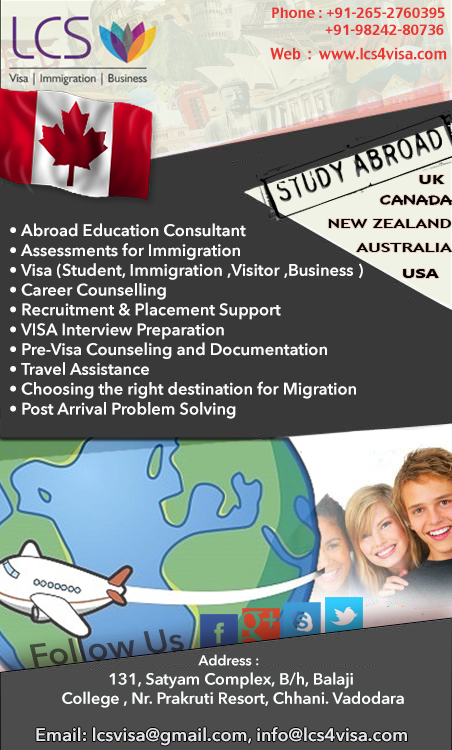
<style>
.page{position:relative;width:452px;height:750px;background:#393939}
.page>*{position:absolute;margin:0}
.t1{font:14px "CharcoalCY";color:#e93733}
.t2{font:15.4px "CharcoalCY";color:#e93733;scale:0.9 1}
.t3{font:13px "MicrosoftTaiLe-Bold";color:#000000;scale:1.42 1}
.t4{font:13px "Chalkboard-Bold";color:#030303;scale:1.42 1}
.t5{font:13px "TrebuchetMS-Bold";color:#000000;scale:1.42 1}
.t6{font:16.5px "AvenirNext-DemiBold";color:#fcfdfe}
.t7{font:13px "TrebuchetMS-Bold";color:#020202;scale:1.42 1}
.t8{font:32.6px "AvenirNext-DemiBold";color:#33383b;scale:1.06 1}
.t9{font:16px "AvenirNext-DemiBold";color:#fcffff}
.t10{font:14px "AvenirNext-DemiBold";color:#fcffff}
.t11{font:18px "AvenirNext-DemiBold";color:#e3e5e7}
</style>
<div class="page">
<p class="t1" style="left:272px;top:7px;width:173px;height:28px">Phone : +91-265-2760395<br>              +91-98242-80736</p>
<p class="t2" style="left:270px;top:47px;width:177px;height:13px">Web  :  www.lcs4visa.com</p>
<p class="t3" style="left:419px;top:175px;width:26px;height:9px">UK</p>
<p class="t4" style="left:380px;top:194px;width:72px;height:11px">CANADA</p>
<p class="t5" style="left:328px;top:219px;width:123px;height:9px">NEW ZEALAND</p>
<p class="t6" style="left:10px;top:223px;width:353px;height:196px">• Abroad Education Consultant                                 <br>• Assessments for Immigration <br>• Visa (Student, Immigration ,Visitor ,Business )      <br>• Career Counselling    <br>• Recruitment &amp; Placement Support            <br>• VISA Interview Preparation    <br>• Pre-Visa Counseling and Documentation       <br>• Travel Assistance   <br>• Choosing the right destination for Migration    <br>• Post Arrival Problem Solving</p>
<p class="t7" style="left:356px;top:243px;width:96px;height:9px">AUSTRALIA</p>
<p class="t3" style="left:403px;top:269px;width:36px;height:9px">USA</p>
<p class="t8" style="left:29px;top:629px;width:155px;height:39px;rotate:-7deg">Follow Us</p>
<p class="t9" style="left:62px;top:654px;width:342px;height:54px;text-align:center"><span class="t10">Address : <br></span>131, Satyam Complex, B/h, Balaji<br> College , Nr. Prakruti Resort, Chhani. Vadodara</p>
<p class="t11" style="left:36px;top:727px;width:371px;height:19px">Email: lcsvisa@gmail.com, info@lcs4visa.com</p>
</div>
